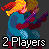
<style>
.page{position:relative;width:49px;height:49px;background:#333333}
.page>*{position:absolute;margin:0}
.t1{font:8px "MS Sans Serif";color:#ffffff}
</style>
<div class="page">
<p class="t1" style="left:3px;top:37px;width:42px;height:11px">2 Players</p>
</div>
